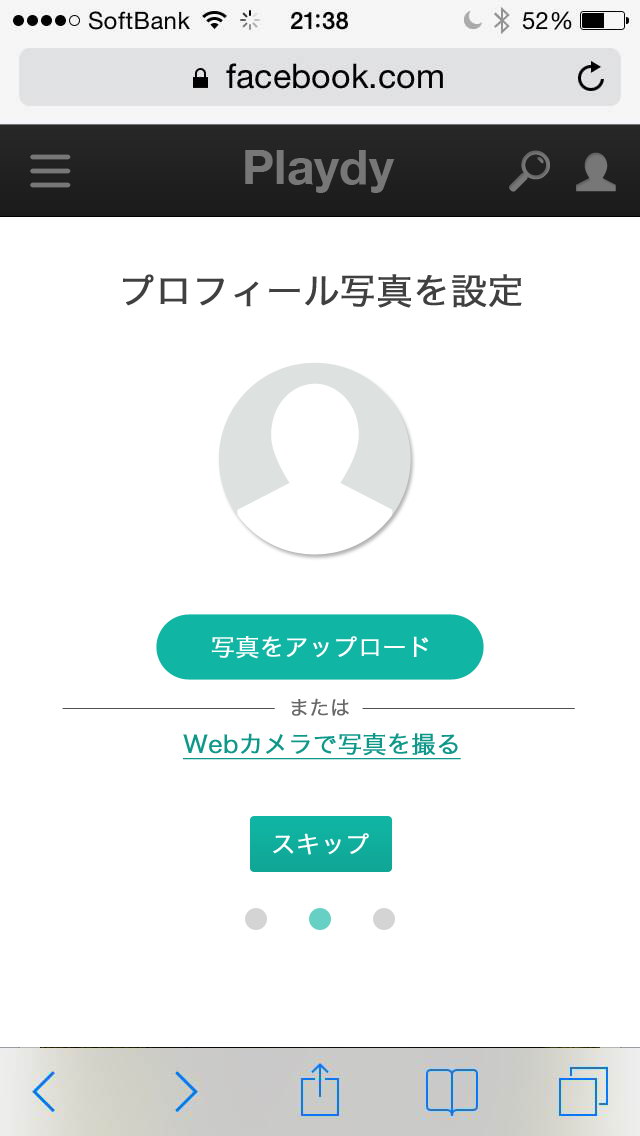
<style>
.page{position:relative;width:640px;height:1136px;background:#ffffff}
.page>*{position:absolute;margin:0}
.t1{font:48px "HelveticaNeue-Bold";color:#777777}
.t2{font:36px "HiraKakuPro-W3";color:#404040;font-weight:bold}
.t3{font:24px "HiraKakuPro-W3";color:#ffffff;font-weight:bold}
.t4{font:20px "HiraKakuPro-W3";color:#686666;font-weight:bold}
.t5{font:24px "HiraKakuPro-W3";color:#0e9889;font-weight:bold;text-decoration:underline}
</style>
<div class="page">
<p class="t1" style="left:245px;top:150px;width:150px;height:43px">Playdy</p>
<p class="t2" style="left:123px;top:274px;width:399px;height:34px">プロフィール写真を設定</p>
<p class="t3" style="left:211px;top:636px;width:218px;height:23px">写真をアップロード</p>
<p class="t4" style="left:291px;top:698px;width:58px;height:18px">または</p>
<p class="t5" style="left:183px;top:733px;width:278px;height:27px">Webカメラで写真を撮る</p>
<p class="t3" style="left:273px;top:833px;width:96px;height:22px">スキップ</p>
</div>
